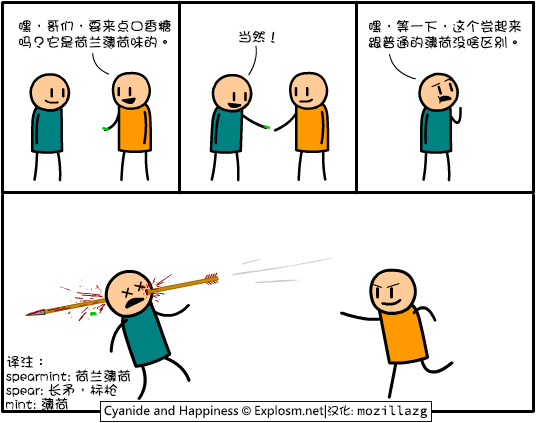
<style>
.page{position:relative;width:536px;height:423px;background:#ffffff}
.page>*{position:absolute;margin:0}
.t1{font:14px/16px "DFGirl";color:#000000}
.t2{font:14px "DFGirl";color:#000000}
.t3{font:14px/14px "DFGirl";color:#000000}
</style>
<div class="page">
<p class="t1" style="left:19px;top:19px;width:153px;height:30px">嘿，哥们，要来点口香糖<br>吗？它是荷兰薄荷味的。</p>
<p class="t2" style="left:239px;top:30px;width:36px;height:13px">当然！</p>
<p class="t1" style="left:368px;top:19px;width:153px;height:30px">嘿，等一下，这个尝起来<br>跟普通的薄荷没啥区别。</p>
<p class="t3" style="left:6px;top:355px;width:124px;height:56px">译注：<br>spearmint: 荷兰薄荷 <br>spear: 长矛，标枪<br>mint: 薄荷</p>
</div>
